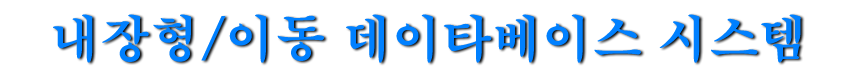
<style>
.page{position:relative;width:850px;height:75px;background:#ffffff}
.page>*{position:absolute;margin:0}
.t1{font:50px "H2mjrE";color:#0080ff}
</style>
<div class="page">
<p class="t1" style="left:53px;top:14px;width:748px;height:49px">내장형/이동 데이타베이스 시스템 시스템</p>
</div>
